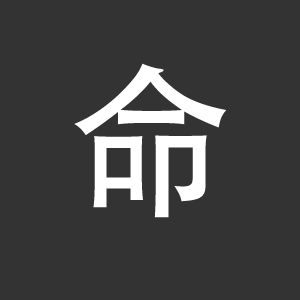
<style>
.page{position:relative;width:300px;height:300px;background:#333333}
.page>*{position:absolute;margin:0}
.t1{font:160px "AdobeHeitiStd-Regular";color:#ffffff}
</style>
<div class="page">
<p class="t1" style="left:74px;top:63px;width:152px;height:155px">命</p>
</div>
